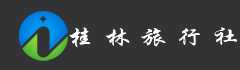
<style>
.page{position:relative;width:240px;height:70px;background:#333333}
.page>*{position:absolute;margin:0}
.t1{font:23.2px "STXingkai";letter-spacing:0.36em;color:#ffffff;scale:1.15 1}
</style>
<div class="page">
<p class="t1" style="left:69px;top:27px;width:169px;height:21px">桂林旅行社</p>
</div>
